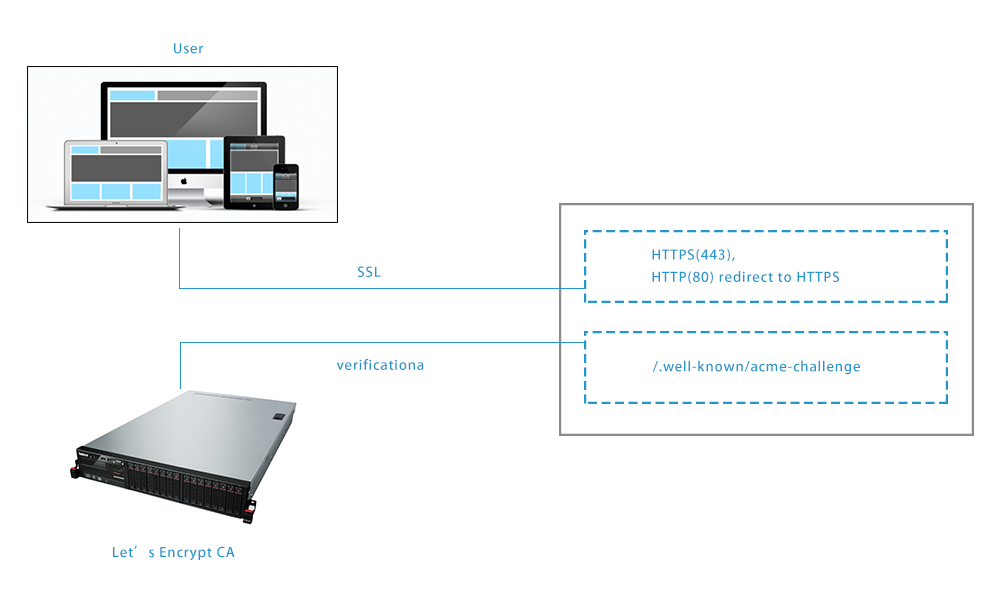
<style>
.page{position:relative;width:1000px;height:600px;background:#ffffff}
.page>*{position:absolute;margin:0}
.t1{font:13.1px "AdobeHeitiStd-Regular";letter-spacing:0.05em;color:#2596cb;scale:1.07 1}
.t2{font:13.1px/22.4px "AdobeHeitiStd-Regular";letter-spacing:0.05em;color:#2596cb;scale:1.07 1}
</style>
<div class="page">
<p class="t1" style="left:174px;top:43px;width:29px;height:11px">User</p>
<p class="t2" style="left:652px;top:249px;width:187px;height:35px">HTTPS(443),<br>HTTP(80) redirect to HTTPS</p>
<p class="t1" style="left:357px;top:266px;width:24px;height:11px">SSL</p>
<p class="t1" style="left:336px;top:359px;width:88px;height:11px">verificationa</p>
<p class="t1" style="left:652px;top:360px;width:208px;height:15px">/.well-known/acme-challenge</p>
<p class="t1" style="left:113px;top:545px;width:122px;height:16px">Let’s Encrypt CA</p>
</div>
